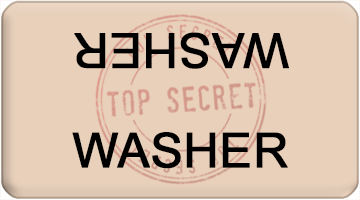
<style>
.page{position:relative;width:360px;height:200px;background:#e8d0bb}
.page>*{position:absolute;margin:0}
.t1{font:48px "ArialMT";color:#000000;font-weight:bold}
</style>
<div class="page">
<p class="t1" style="left:74px;top:32px;width:215px;height:37px;rotate:180deg">WASHER</p>
<p class="t1" style="left:72px;top:132px;width:216px;height:37px">WASHER</p>
</div>
